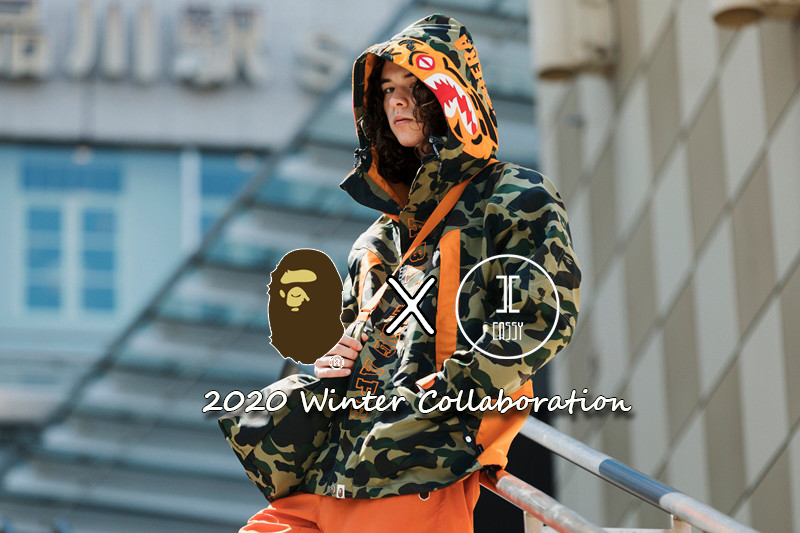
<style>
.page{position:relative;width:800px;height:533px}
.page>*{position:absolute;margin:0}
.t1{font:29.2px "SegoeScript-Bold";color:#ffffff}
</style>
<div class="page">
<p class="t1" style="left:202px;top:388px;width:430px;height:26px">2020 Winter Collaboration</p>
</div>
